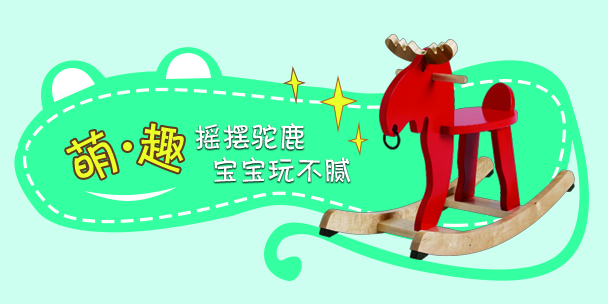
<style>
.page{position:relative;width:608px;height:304px;background:#ccffef}
.page>*{position:absolute;margin:0}
.t1{font:53.6px "FZKATJW--GB1-0";letter-spacing:-0.1em;color:#eaff27}
.t2{font:29.8px "FZKATJW--GB1-0";letter-spacing:-0.05em;color:#ffffff}
.t3{font:53.4px "FZKATJW--GB1-0";letter-spacing:-0.1em;color:#eaff27}
</style>
<div class="page">
<p class="t1" style="left:138px;top:123px;width:46px;height:50px;rotate:9deg">趣</p>
<p class="t2" style="left:195px;top:123px;width:109px;height:27px">摇摆驼鹿</p>
<p class="t3" style="left:66px;top:131px;width:52px;height:48px;rotate:-26deg">萌</p>
<p class="t2" style="left:214px;top:157px;width:137px;height:26px">宝宝玩不腻</p>
</div>
